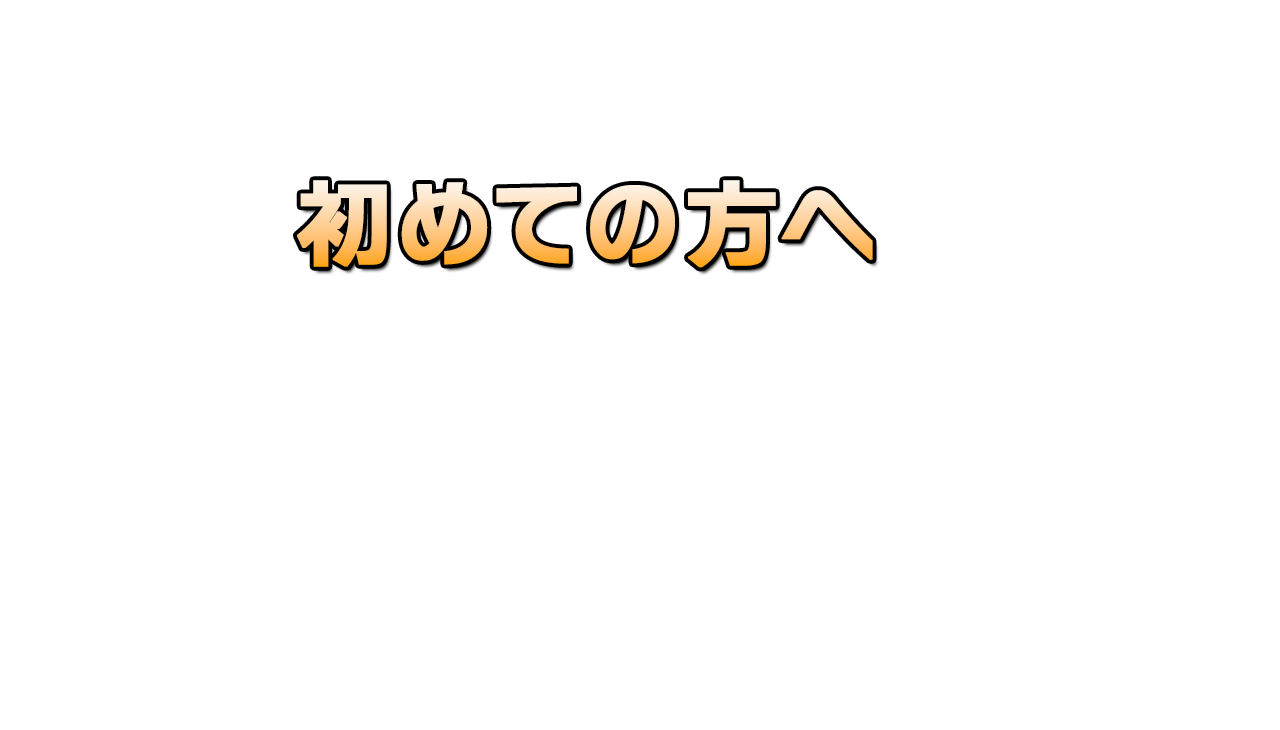
<style>
.page{position:relative;width:1280px;height:730px;background:#ffffff}
.page>*{position:absolute;margin:0}
.t1{font:96px "NitalagoRuika-06";letter-spacing:0.05em;font-weight:bold}
</style>
<div class="page">
<p class="t1" style="left:297px;top:180px;width:576px;height:88px">初めての方へ</p>
</div>
